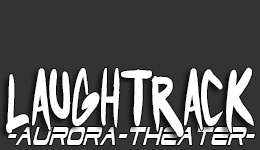
<style>
.page{position:relative;width:260px;height:150px;background:#333333}
.page>*{position:absolute;margin:0}
.t1{font:64.7px "Punkboy";color:#ffffff;scale:0.69 1}
.t2{font:31.6px "DodgerCondensedItalic";color:#ffffff;scale:0.63 1}
</style>
<div class="page">
<p class="t1" style="left:6px;top:67px;width:248px;height:70px">LAUGHTRACK</p>
<p class="t2" style="left:7px;top:127px;width:248px;height:18px">-AURORA-THEATER-</p>
</div>
